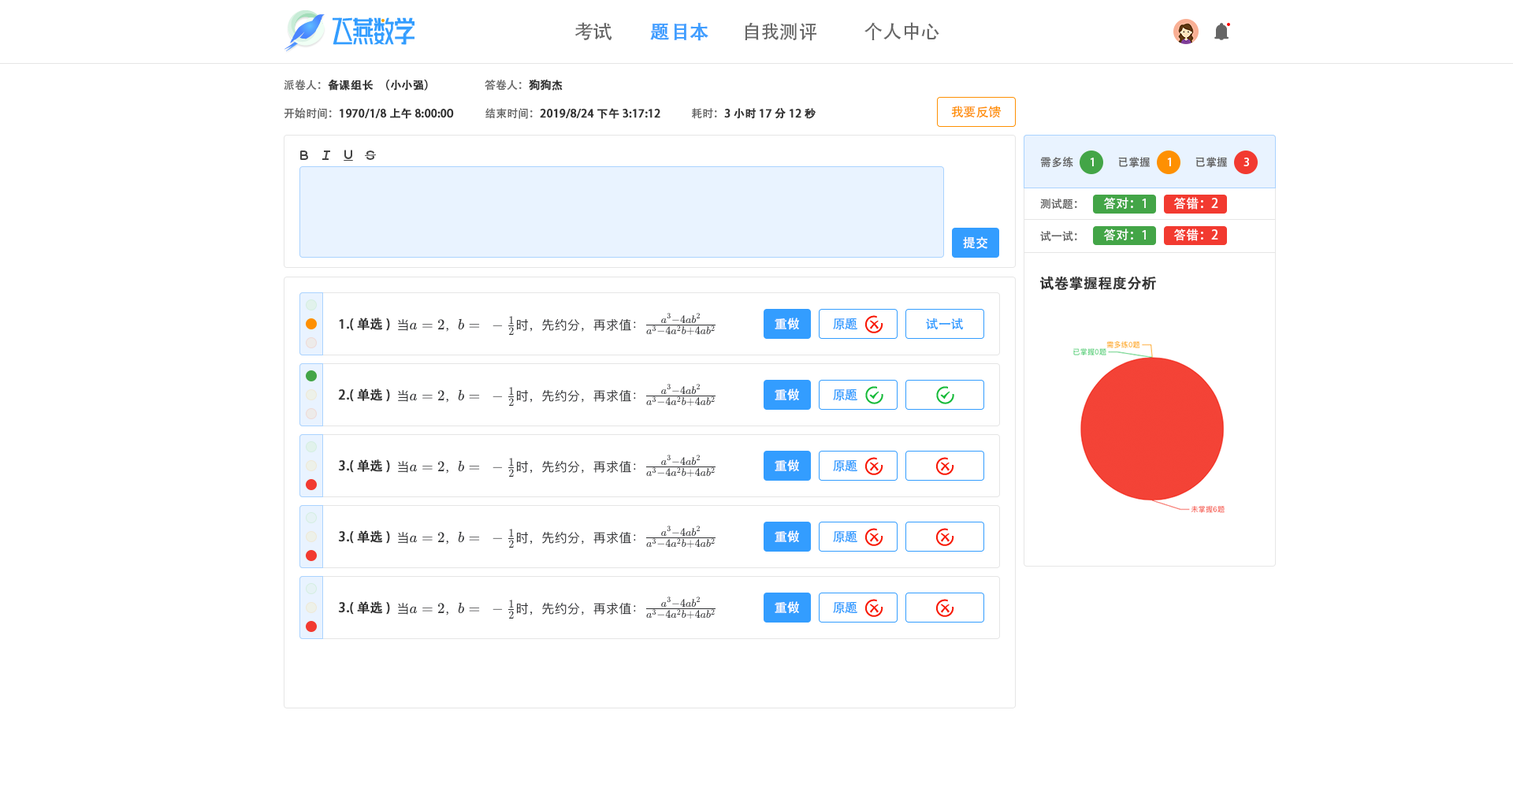
<style>
.page{position:relative;width:1513px;height:788px;background:#ffffff}
.page>*{position:absolute;margin:0}
.t1{font:18.9px "AdobeHeitiStd-Regular";color:#666666}
.t2{font:18.9px "AdobeHeitiStd-Regular";color:#409eff;font-weight:bold}
.t3{font:11px "AdobeHeitiStd-Regular";color:#333333;font-weight:bold}
.t4{font:11px "AdobeHeitiStd-Regular";color:#666666}
.t5{font:12.6px "AdobeHeitiStd-Regular";color:#fe9002}
.t6{font:11px "AdobeHeitiStd-Regular";color:#ffffff}
.t7{font:12.6px "AdobeHeitiStd-Regular";color:#ffffff}
.t8{font:14.2px "AdobeHeitiStd-Regular";color:#333333;font-weight:bold}
.t9{font:12.6px "AdobeHeitiStd-Regular";color:#333333;font-weight:bold}
.t10{font:12.6px "AdobeHeitiStd-Regular";color:#339dff}
</style>
<div class="page">
<p class="t1" style="left:575px;top:22px;width:37px;height:18px">考试</p>
<p class="t2" style="left:650px;top:23px;width:58px;height:18px">题目本</p>
<p class="t1" style="left:745px;top:22px;width:71px;height:19px">自我测评</p>
<p class="t1" style="left:865px;top:22px;width:74px;height:18px">个人中心</p>
<p class="t3" style="left:284px;top:80px;width:144px;height:11px"><span class="t4">派卷人：</span>备课组长（小小强）</p>
<p class="t4" style="left:485px;top:79px;width:78px;height:12px">答卷人：<span class="t3">狗狗杰</span></p>
<p class="t3" style="left:284px;top:108px;width:170px;height:11px"><span class="t4">开始时间：</span>1970/1/8 上午8:00:00</p>
<p class="t3" style="left:485px;top:108px;width:175px;height:11px"><span class="t4">结束时间：</span>2019/8/24 下午3:17:12</p>
<p class="t3" style="left:692px;top:108px;width:124px;height:11px"><span class="t4">耗时：</span>3小时17分12秒</p>
<p class="t5" style="left:951px;top:106px;width:51px;height:12px">我要反馈</p>
<p class="t4" style="left:1041px;top:157px;width:32px;height:11px">需多练</p>
<p class="t6" style="left:1090px;top:158px;width:4px;height:8px">1</p>
<p class="t4" style="left:1118px;top:157px;width:32px;height:11px">已掌握</p>
<p class="t6" style="left:1167px;top:158px;width:4px;height:8px">1</p>
<p class="t4" style="left:1196px;top:157px;width:31px;height:11px">已掌握</p>
<p class="t6" style="left:1244px;top:158px;width:5px;height:8px">3</p>
<p class="t7" style="left:1103px;top:197px;width:43px;height:13px">答对：1</p>
<p class="t7" style="left:1173px;top:197px;width:45px;height:13px">答错：2</p>
<p class="t4" style="left:1040px;top:199px;width:37px;height:11px">测试题：</p>
<p class="t4" style="left:1040px;top:231px;width:37px;height:10px">试一试：</p>
<p class="t7" style="left:1103px;top:229px;width:43px;height:12px">答对：1</p>
<p class="t7" style="left:1173px;top:229px;width:45px;height:12px">答错：2</p>
<p class="t7" style="left:963px;top:236px;width:24px;height:13px">提交</p>
<p class="t8" style="left:1040px;top:276px;width:116px;height:14px">试卷掌握程度分析</p>
<p class="t9" style="left:339px;top:318px;width:51px;height:13px">1.(单选)</p>
<p class="t7" style="left:775px;top:318px;width:24px;height:12px">重做</p>
<p class="t10" style="left:833px;top:318px;width:24px;height:12px">原题</p>
<p class="t10" style="left:926px;top:318px;width:38px;height:12px">试一试</p>
<p class="t9" style="left:338px;top:389px;width:52px;height:13px">2.(单选)</p>
<p class="t7" style="left:775px;top:389px;width:24px;height:12px">重做</p>
<p class="t10" style="left:833px;top:389px;width:24px;height:12px">原题</p>
<p class="t9" style="left:338px;top:459px;width:52px;height:14px">3.(单选)</p>
<p class="t7" style="left:775px;top:459px;width:24px;height:13px">重做</p>
<p class="t10" style="left:833px;top:459px;width:24px;height:13px">原题</p>
<p class="t9" style="left:338px;top:530px;width:52px;height:14px">3.(单选)</p>
<p class="t7" style="left:775px;top:530px;width:24px;height:13px">重做</p>
<p class="t10" style="left:833px;top:530px;width:24px;height:13px">原题</p>
<p class="t9" style="left:338px;top:601px;width:52px;height:14px">3.(单选)</p>
<p class="t7" style="left:775px;top:601px;width:24px;height:13px">重做</p>
<p class="t10" style="left:833px;top:601px;width:24px;height:13px">原题</p>
</div>
